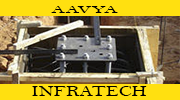
<style>
.page{position:relative;width:180px;height:100px;background:#ffe010}
.page>*{position:absolute;margin:0}
.t1{font:11px "BellMT";color:#000000;scale:1.86 1}
.t2{font:15.7px "BellMT";color:#000000;scale:1.27 1}
</style>
<div class="page">
<p class="t1" style="left:51px;top:6px;width:67px;height:7px">AAVYA</p>
<p class="t2" style="left:32px;top:86px;width:115px;height:10px">INFRATECH</p>
</div>
